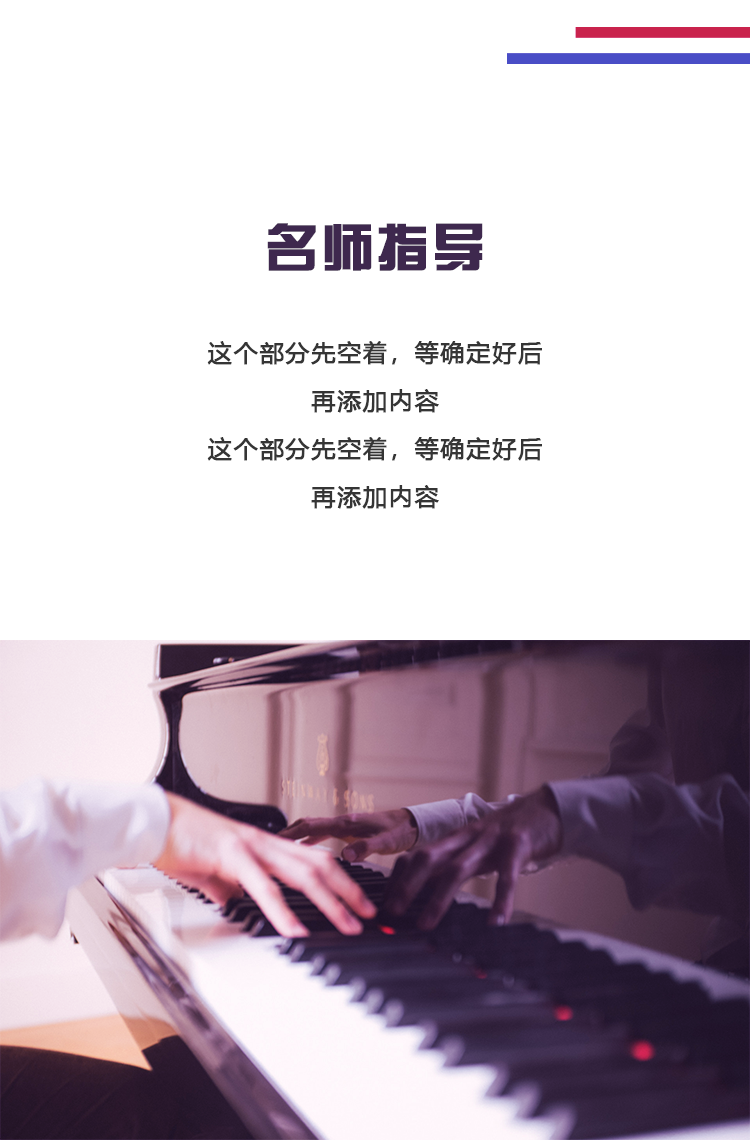
<style>
.page{position:relative;width:750px;height:1140px;background:#ffffff}
.page>*{position:absolute;margin:0}
.t1{font:24px/48px "MicrosoftYaHei";letter-spacing:0.05em;color:#353535;font-weight:bold}
.t2{font:52px/60px "FZZYJW--GB1-0";letter-spacing:0.05em;color:#3e284e;font-weight:bold}
</style>
<div class="page">
<p class="t1" style="left:207px;top:223px;width:335px;height:286px;text-align:center"><span class="t2">名师指导<br><br></span>这个部分先空着，等确定好后<br>再添加内容<br>这个部分先空着，等确定好后<br>再添加内容</p>
</div>
